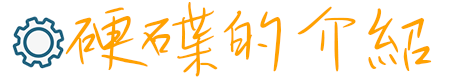
<style>
.page{position:relative;width:462px;height:81px;background:#ffffff}
.page>*{position:absolute;margin:0}
.t1{font:100px "HanyiSentyMeadow";color:#ffa200}
</style>
<div class="page">
<p class="t1" style="left:65px;top:2px;width:367px;height:75px">硬碟的介紹</p>
</div>
